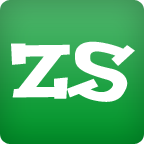
<style>
.page{position:relative;width:144px;height:144px}
.page>*{position:absolute;margin:0}
.t1{font:67px "Yahoo";letter-spacing:0.06em;color:#ffffff}
</style>
<div class="page">
<p class="t1" style="left:11px;top:41px;width:124px;height:61px">ZS</p>
</div>
